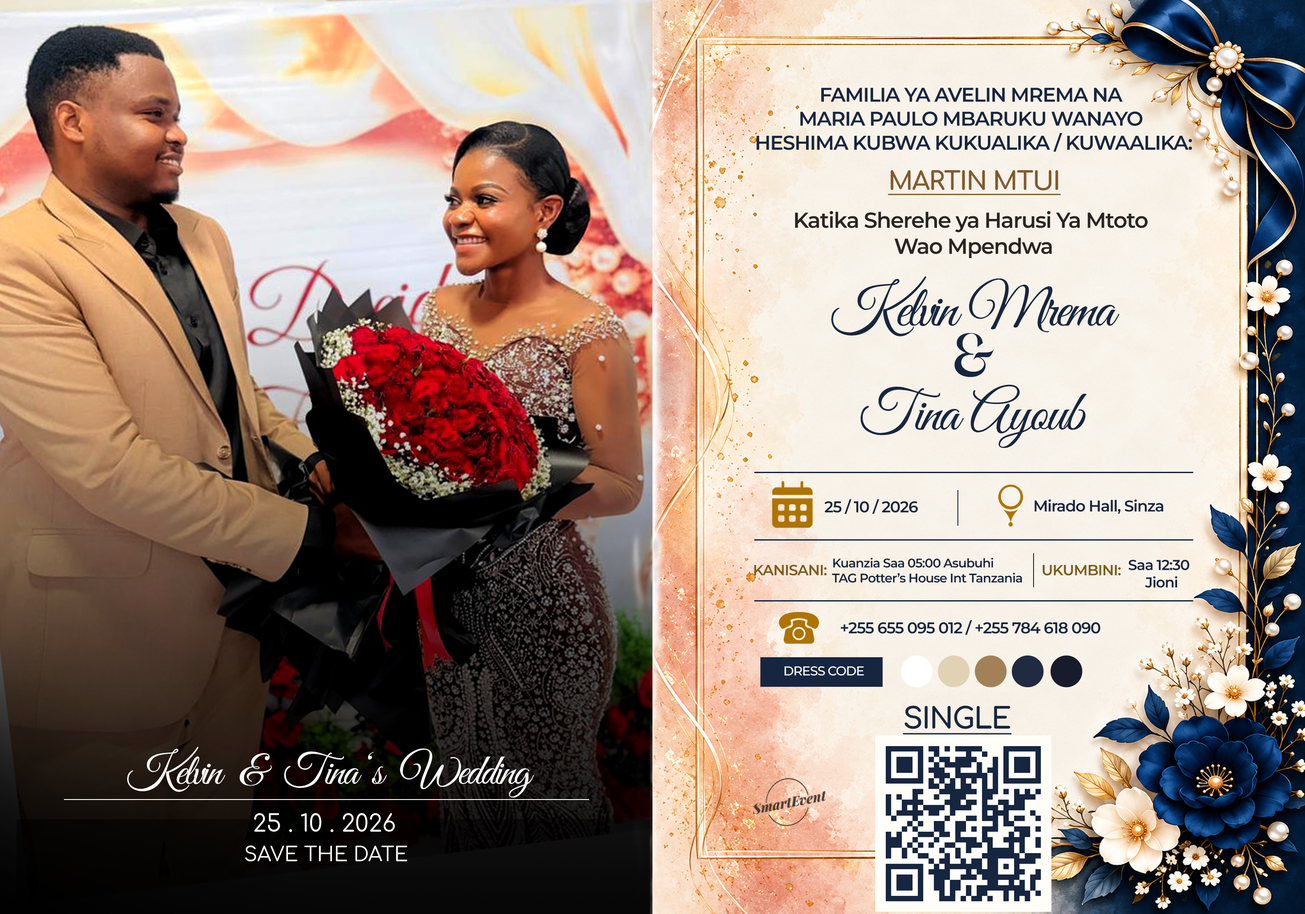
<style>
.page{position:relative;width:1305px;height:914px}
.page>*{position:absolute;margin:0}
.t1{font:19.9px "Montserrat-SemiBold";letter-spacing:-0.04em;color:#172640;text-transform:uppercase}
.t2{font:21.7px "Montserrat-SemiBold";letter-spacing:-0.04em;color:#292522}
.t3{font:25.4px "Comfortaa-Bold";letter-spacing:-0.04em;color:#805a2e;text-decoration:underline}
.t4{font:58px/50.8px "GreatVibes-Regular";letter-spacing:-0.04em;color:#172640}
.t5{font:58px/50.8px "Branela-Regular";letter-spacing:-0.04em;color:#172640}
.t6{font:58px "GreatVibes-Regular";letter-spacing:-0.04em;color:#172640}
.t7{font:15.6px "Montserrat-SemiBold";letter-spacing:-0.04em;color:#172640}
.t8{font:12.5px "Montserrat-SemiBold";letter-spacing:-0.04em;color:#172640}
.t9{font:14.8px "Montserrat-SemiBold";letter-spacing:-0.04em;color:#805a17}
.t10{font:14.5px "Montserrat-SemiBold";letter-spacing:-0.04em;color:#172640}
.t11{font:12.7px "Montserrat-Medium";letter-spacing:-0.04em;color:#ffffff}
.t12{font:29px "Comfortaa-Bold";letter-spacing:-0.04em;color:#172640;text-decoration:underline}
</style>
<div class="page">
<p class="t1" style="left:757px;top:87px;width:435px;height:171px;text-align:center">Familia Ya Avelin Mrema Na <br>MARIA Paulo Mbaruku Wanayo <br>heshima Kubwa kukualika / kuwaalika:<br><br><br><span class="t2">Katika Sherehe ya Harusi Ya Mtoto <br>Wao Mpendwa</span></p>
<p class="t3" style="left:888px;top:170px;width:173px;height:25px">MARTIN MTUI</p>
<p class="t4" style="left:831px;top:276px;width:288px;height:101px;text-align:center">Kelvin Mrema<br><span class="t5">&amp;</span></p>
<p class="t6" style="left:861px;top:385px;width:226px;height:63px">Tina Ayoub</p>
<p class="t7" style="left:824px;top:499px;width:94px;height:15px">25 / 10 / 2026</p>
<p class="t7" style="left:1035px;top:499px;width:128px;height:15px">Mirado Hall, Sinza</p>
<p class="t8" style="left:832px;top:557px;width:190px;height:26px">Kuanzia Saa 05:00 Asubuhi<br>TAG Potter’s House Int Tanzania</p>
<p class="t9" style="left:754px;top:564px;width:73px;height:11px">KANISANI:</p>
<p class="t9" style="left:1043px;top:565px;width:78px;height:10px">UKUMBINI:</p>
<p class="t10" style="left:1129px;top:559px;width:60px;height:28px">Saa 12:30 <br>     Jioni</p>
<p class="t7" style="left:841px;top:620px;width:260px;height:15px">+255 655 095 012 / +255 784 618 090</p>
<p class="t11" style="left:784px;top:666px;width:80px;height:9px">DRESS CODE</p>
<p class="t12" style="left:903px;top:705px;width:109px;height:29px">SINGLE</p>
</div>
